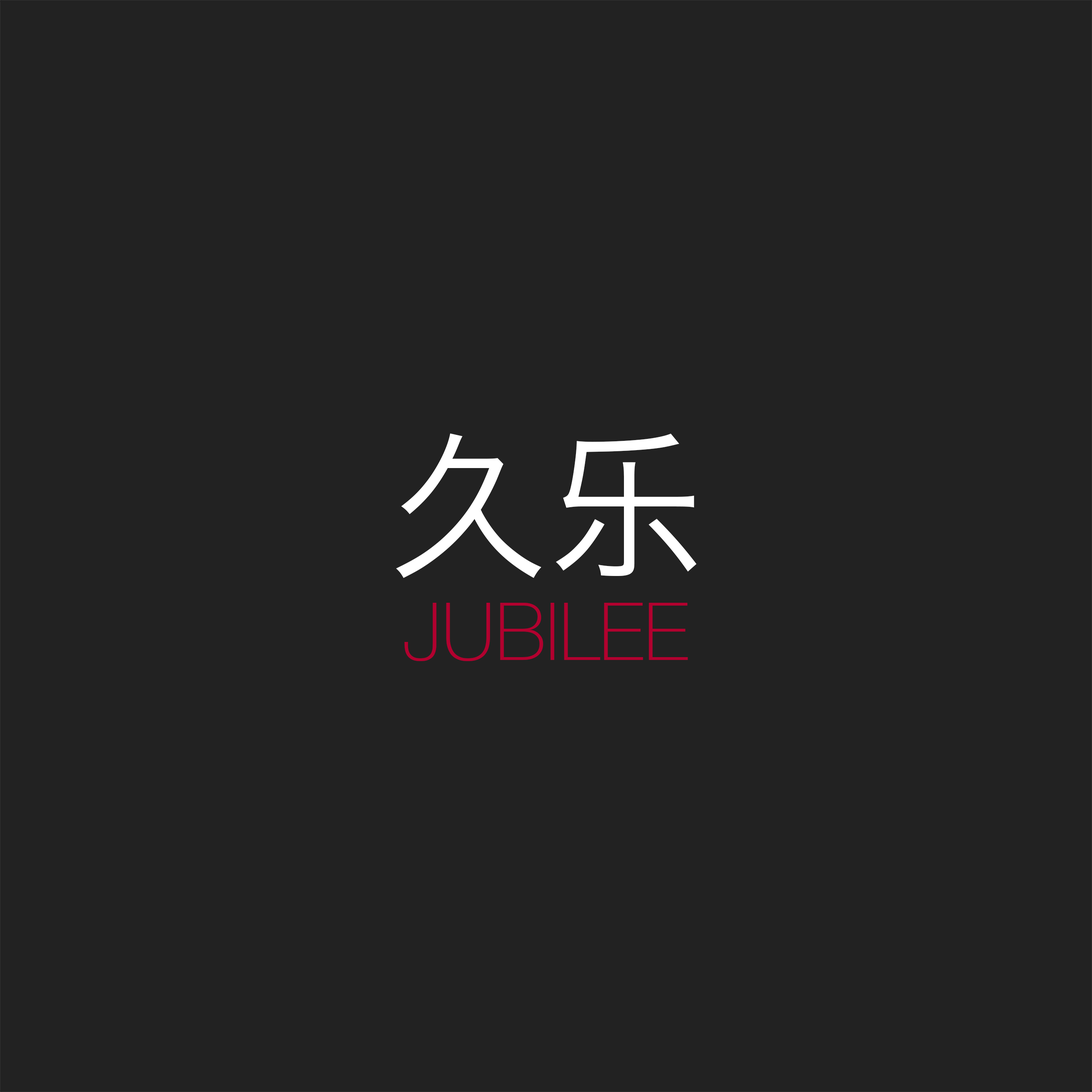
<style>
.page{position:relative;width:1092px;height:1092px;background:#222222}
.page>*{position:absolute;margin:0}
.t1{font:159.9px "HiraginoSansGB-W3";color:#ffffff}
.t2{font:79.9px "HelveticaNeue-Thin";color:#b2002f}
</style>
<div class="page">
<p class="t1" style="left:396px;top:433px;width:301px;height:145px">久乐</p>
<p class="t2" style="left:404px;top:603px;width:284px;height:58px">JUBILEE</p>
</div>
